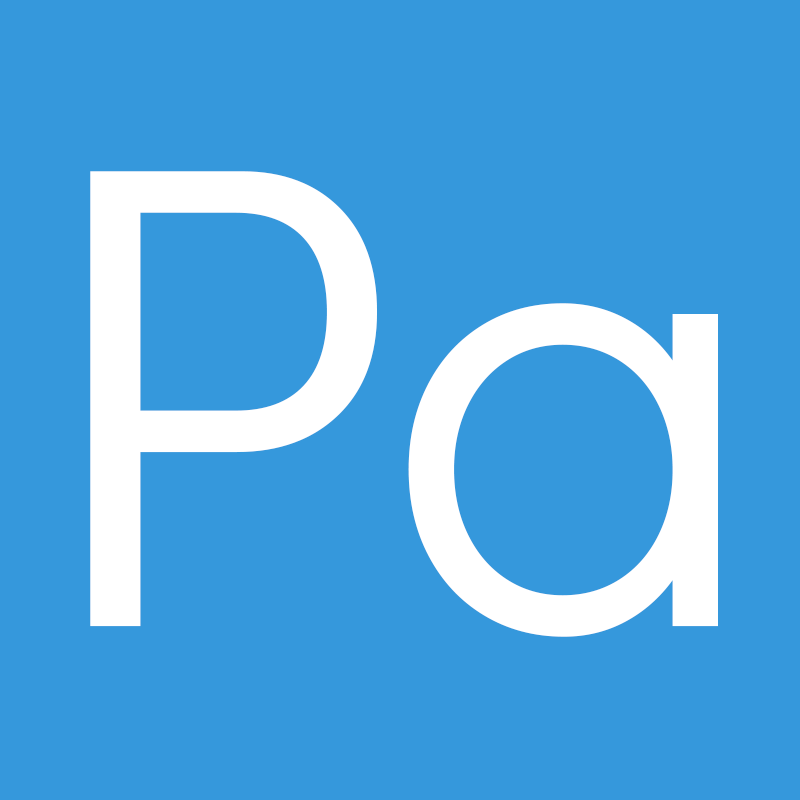
<style>
.page{position:relative;width:800px;height:800px;background:#3598dc}
.page>*{position:absolute;margin:0}
.t1{font:666.7px "DidactGothic-Regular";color:#ffffff}
</style>
<div class="page">
<p class="t1" style="left:90px;top:171px;width:628px;height:466px">Pa</p>
</div>
